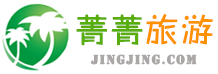
<style>
.page{position:relative;width:218px;height:74px;background:#ffffff}
.page>*{position:absolute;margin:0}
.t1{font:32px "GJJZHYJW--GB1-0";letter-spacing:0.08em;color:#56ad0c;font-weight:bold}
.t2{font:32px "GJJZHYJW--GB1-0";letter-spacing:0.08em;color:#ff9100;font-weight:bold}
.t3{font:12px "StencilStd";letter-spacing:0.08em;color:#aba7a7;font-weight:bold}
</style>
<div class="page">
<p class="t1" style="left:76px;top:14px;width:67px;height:32px">菁菁</p>
<p class="t2" style="left:146px;top:14px;width:67px;height:31px">旅游</p>
<p class="t3" style="left:90px;top:54px;width:107px;height:11px">jingjing.com</p>
</div>
